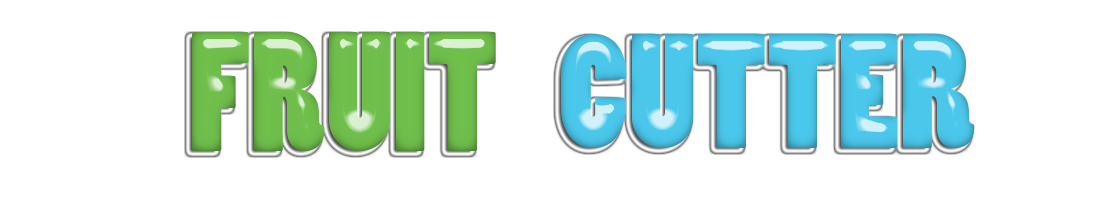
<style>
.page{position:relative;width:1100px;height:200px;background:#ffffff}
.page>*{position:absolute;margin:0}
.t1{font:158.4px "PoplarStd";color:#6fbe4b;scale:0.93 1}
.t2{font:151.6px "PoplarStd";color:#4ac7eb}
</style>
<div class="page">
<p class="t1" style="left:192px;top:32px;width:304px;height:119px">FRUIT</p>
<p class="t2" style="left:561px;top:33px;width:414px;height:116px">CUTTER</p>
</div>
